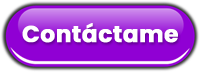
<style>
.page{position:relative;width:200px;height:72px}
.page>*{position:absolute;margin:0}
.t1{font:23.2px "Poppins-Bold";color:#ffffff;font-weight:bold}
</style>
<div class="page">
<p class="t1" style="left:22px;top:23px;width:156px;height:20px">Contáctame</p>
</div>
